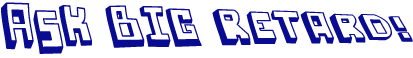
<style>
.page{position:relative;width:413px;height:58px;background:#ffffff}
.page>*{position:absolute;margin:0}
.t1{font:48px "LoweryAuto";color:#090c90}
</style>
<div class="page">
<p class="t1" style="left:1px;top:2px;width:412px;height:52px">Ask Big Retard!</p>
</div>
